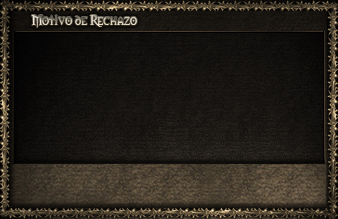
<style>
.page{position:relative;width:338px;height:219px}
.page>*{position:absolute;margin:0}
.t1{font:13px "Morpheus"}
</style>
<div class="page">
<p class="t1" style="left:31px;top:15px;width:106px;height:13px">Motivo de Rechazo</p>
</div>
